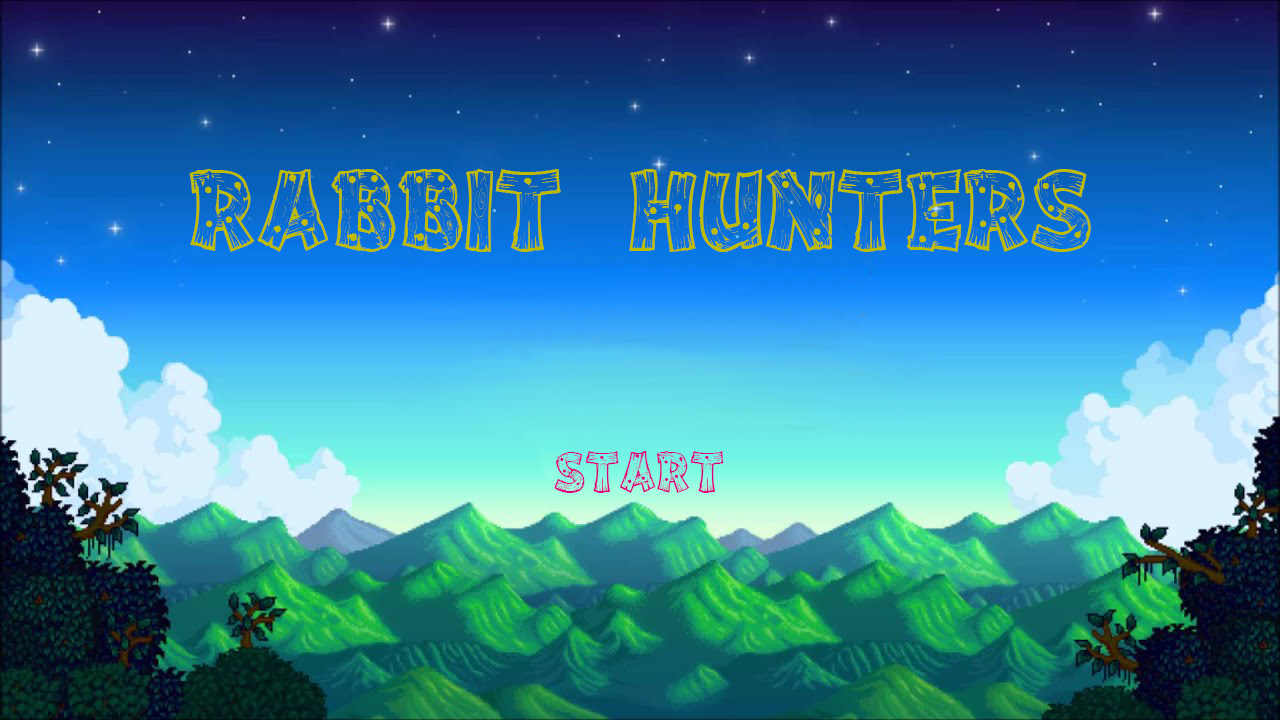
<style>
.page{position:relative;width:1280px;height:720px}
.page>*{position:absolute;margin:0}
.t1{font:100px "DriftType";color:#bebc00}
.t2{font:50px "DriftType";color:#df007e}
</style>
<div class="page">
<p class="t1" style="left:189px;top:169px;width:902px;height:83px">Rabbit Hunters</p>
<p class="t2" style="left:554px;top:451px;width:170px;height:42px">Start</p>
</div>
